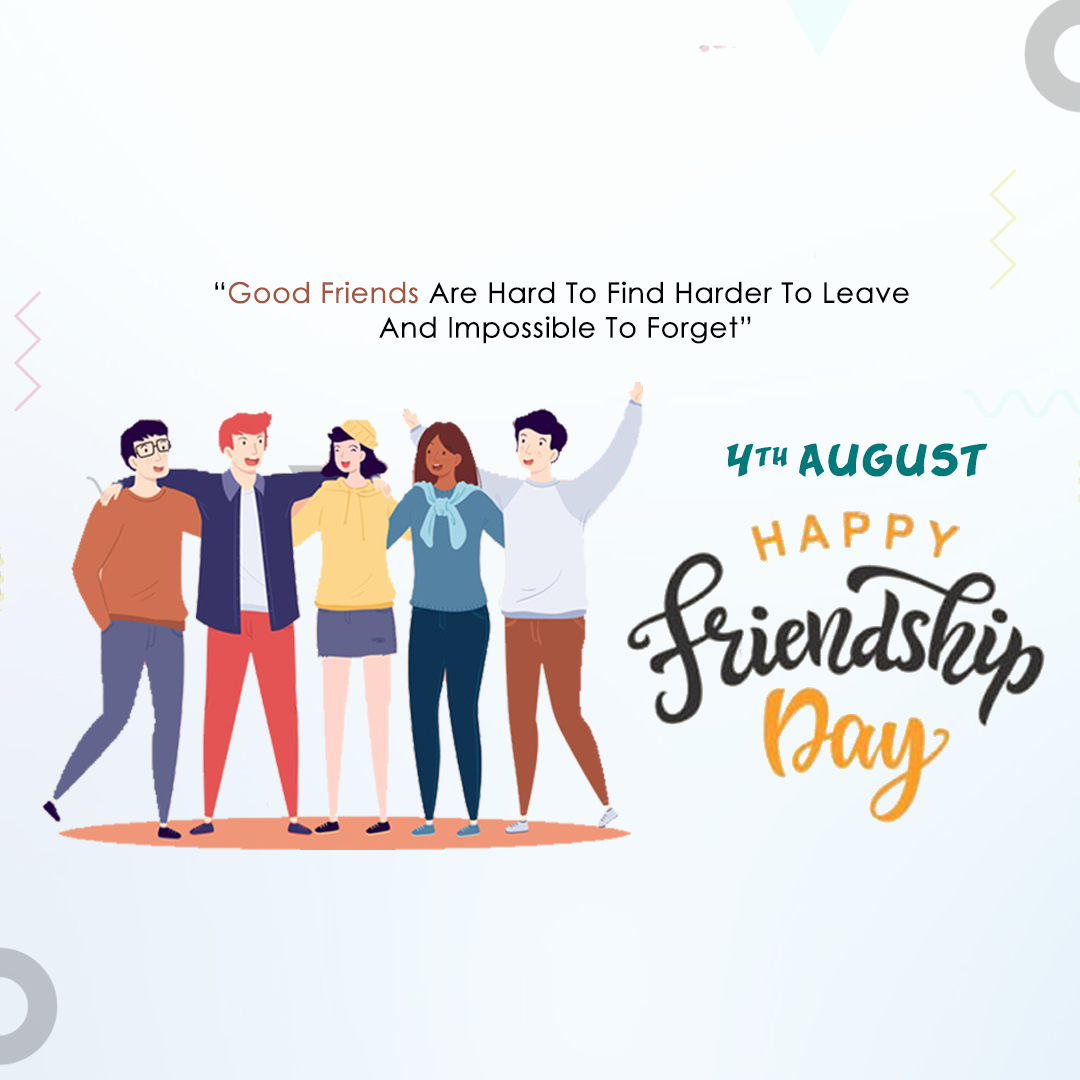
<style>
.page{position:relative;width:1080px;height:1080px}
.page>*{position:absolute;margin:0}
.t1{font:28.4px/34.7px "CenturyGothic";color:#010101;font-weight:bold}
.t2{font:28.4px/34.7px "CenturyGothic";color:#a7543f;font-weight:bold}
.t3{font:39.6px "SergeantSixPack";color:#00797b;font-weight:bold}
</style>
<div class="page">
<p class="t1" style="left:215px;top:281px;width:694px;height:63px;text-align:center">“<span class="t2">Good Friends</span> Are Hard To Find Harder To Leave<br> And Impossible To Forget”</p>
<p class="t3" style="left:727px;top:443px;width:261px;height:34px">4th August</p>
</div>
